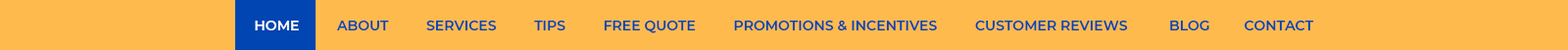
<style>
.page{position:relative;width:1568px;height:50px;background:#ffba4e}
.page>*{position:absolute;margin:0}
.t1{font:13.7px "Montserrat-SemiBold";color:#0045b1}
.t2{font:13.7px "Montserrat-SemiBold";color:#ffffff}
</style>
<div class="page">
<p class="t1" style="left:255px;top:21px;width:1059px;height:12px"><span class="t2">HOME</span>          ABOUT          SERVICES          TIPS          FREE QUOTE          PROMOTIONS &amp; INCENTIVES          CUSTOMER REVIEWS           BLOG         CONTACT</p>
</div>
